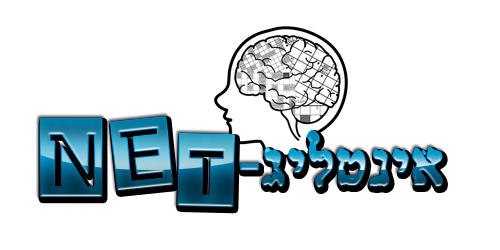
<style>
.page{position:relative;width:500px;height:250px;background:#ffffff}
.page>*{position:absolute;margin:0}
.t1{font:70px "Ariana"}
.t2{font:70px "MyriadHebrew-Regular"}
.t3{font:115px "EarwigFactory-Regular"}
</style>
<div class="page">
<p class="t1" style="left:40px;top:117px;width:402px;height:90px">אינטליג<span class="t2">-</span><span class="t3">NET</span></p>
</div>
